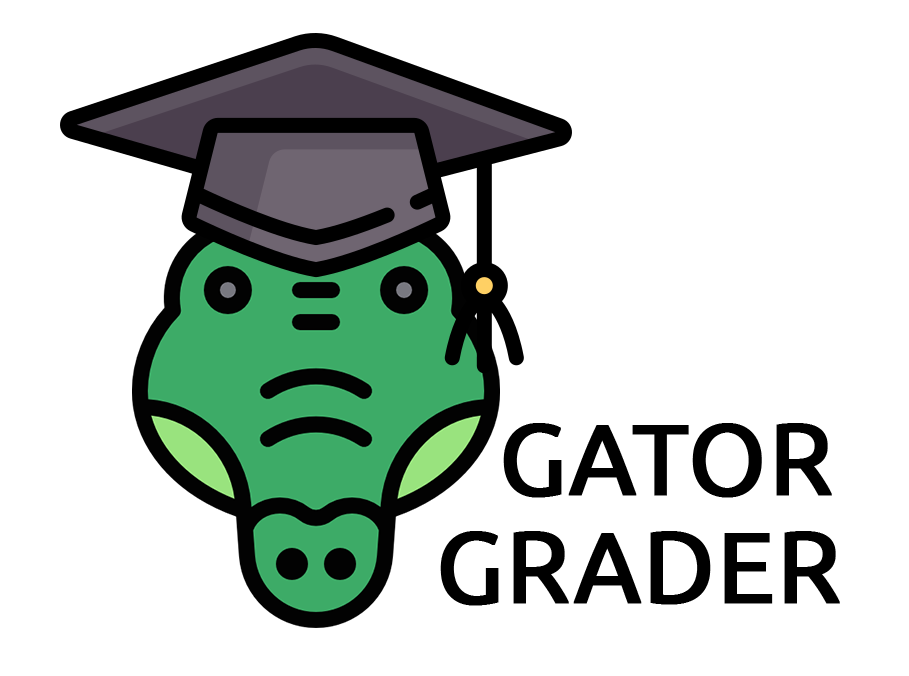
<style>
.page{position:relative;width:909px;height:676px;background:#ffffff}
.page>*{position:absolute;margin:0}
.t1{font:100px "Ubuntu";color:#000000;text-transform:uppercase;font-weight:bold}
</style>
<div class="page">
<p class="t1" style="left:503px;top:423px;width:329px;height:75px">gator</p>
<p class="t1" style="left:440px;top:531px;width:400px;height:75px">grader</p>
</div>
